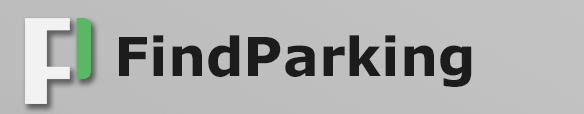
<style>
.page{position:relative;width:584px;height:114px}
.page>*{position:absolute;margin:0}
.t1{font:53.7px "Verdana-Bold";color:#1c1c1c}
</style>
<div class="page">
<p class="t1" style="left:119px;top:35px;width:353px;height:52px">FindParking</p>
</div>
